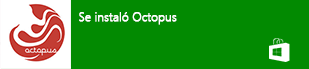
<style>
.page{position:relative;width:309px;height:69px;background:#028a01}
.page>*{position:absolute;margin:0}
.t1{font:11.9px "SegoeUI-Light";color:#ffffff;font-weight:bold}
</style>
<div class="page">
<p class="t1" style="left:79px;top:12px;width:98px;height:13px">Se instaló Octopus</p>
</div>
